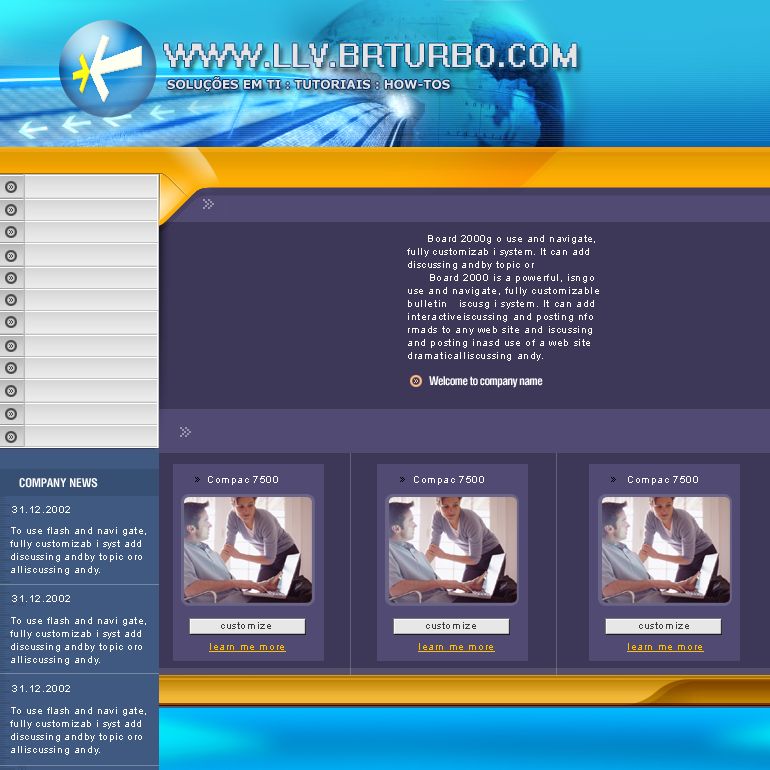
<style>
.page{position:relative;width:770px;height:770px;background:#3d3758}
.page>*{position:absolute;margin:0}
.t1{font:30px "System";color:#e4e4e4;text-transform:uppercase}
.t2{font:12px "Verdana-Bold";color:#e4e4e4;text-transform:uppercase}
.t3{font:10px/13px "ArialMT";letter-spacing:0.06em;color:#ffffff}
.t4{font:10px/13px "ArialMT";letter-spacing:0.04em;color:#ffffff}
.t5{font:12px "HeliosCond-Bold";letter-spacing:-0.05em;color:#ffffff}
.t6{font:12px "HeliosCond-Bold";color:#ffffff}
.t7{font:10px "ArialMT";letter-spacing:0.06em;color:#ffffff}
.t8{font:10px "ArialMT";letter-spacing:0.06em;color:#3c3c3c}
.t9{font:10px "ArialMT";letter-spacing:0.06em;color:#ffc000;text-decoration:underline}
</style>
<div class="page">
<p class="t1" style="left:164px;top:43px;width:413px;height:24px">www.llv.brturbo.com</p>
<p class="t2" style="left:167px;top:77px;width:283px;height:15px">Soluções em TI : Tutoriais : how-tos</p>
<p class="t3" style="left:407px;top:235px;width:192px;height:126px"><span class="t4">      Board 2000g o use and navigate, <br>fully customizab i system. It can add <br>discussing andby topic or <br></span>      Board 2000 is a powerful, isngo <br>use and navigate, fully customizable  <br>bulletin   iscusg i system. It can add <br>interactiveiscussing and posting nfo<br>rmads to any web site and iscussing <br>and posting inasd use of a web site <br>dramaticalliscussing andy.</p>
<p class="t5" style="left:429px;top:376px;width:114px;height:12px">Welcome to company name</p>
<p class="t6" style="left:19px;top:478px;width:79px;height:10px">COMPANY NEWS</p>
<p class="t7" style="left:208px;top:476px;width:70px;height:9px">Compac 7500</p>
<p class="t7" style="left:414px;top:476px;width:70px;height:9px">Compac 7500</p>
<p class="t7" style="left:628px;top:476px;width:70px;height:9px">Compac 7500</p>
<p class="t7" style="left:12px;top:506px;width:58px;height:7px">31.12.2002</p>
<p class="t4" style="left:10px;top:527px;width:136px;height:48px">To use flash and navi gate, <br>fully customizab i syst add <br>discussing andby topic or<span class="t3">o<br>alliscussing andy.</span></p>
<p class="t7" style="left:12px;top:595px;width:58px;height:7px">31.12.2002</p>
<p class="t4" style="left:10px;top:617px;width:136px;height:48px">To use flash and navi gate, <br>fully customizab i syst add <br>discussing andby topic or<span class="t3">o<br>alliscussing andy.</span></p>
<p class="t8" style="left:221px;top:622px;width:50px;height:7px">customize</p>
<p class="t8" style="left:426px;top:622px;width:50px;height:7px">customize</p>
<p class="t8" style="left:639px;top:622px;width:50px;height:7px">customize</p>
<p class="t9" style="left:209px;top:643px;width:77px;height:9px">learn me more</p>
<p class="t9" style="left:418px;top:643px;width:77px;height:9px">learn me more</p>
<p class="t9" style="left:627px;top:643px;width:77px;height:9px">learn me more</p>
<p class="t7" style="left:12px;top:685px;width:58px;height:7px">31.12.2002</p>
<p class="t4" style="left:10px;top:707px;width:136px;height:48px">To use flash and navi gate, <br>fully customizab i syst add <br>discussing andby topic or<span class="t3">o<br>alliscussing andy.</span></p>
</div>
